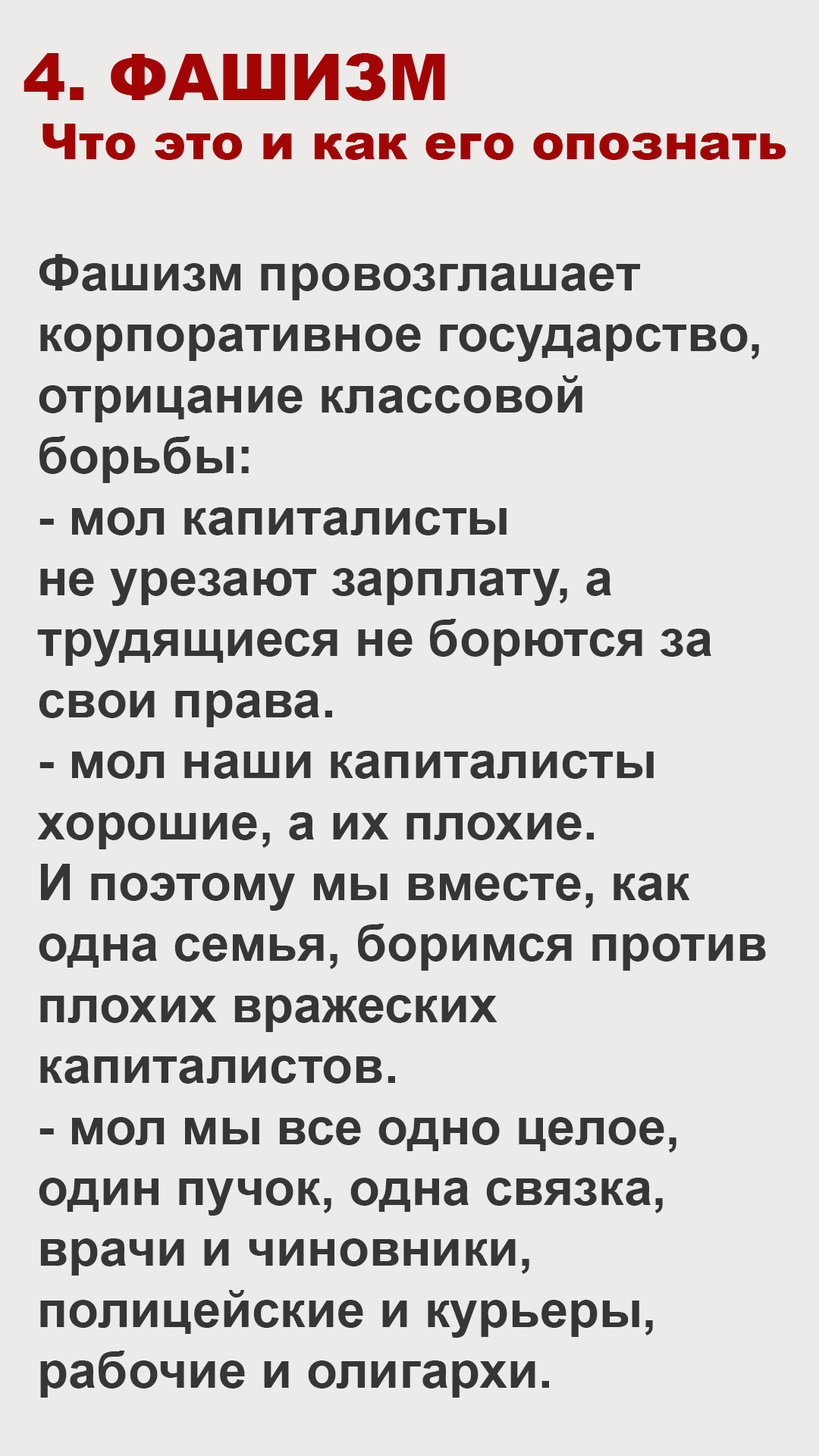
<style>
.page{position:relative;width:819px;height:1456px;background:#ecebe9}
.page>*{position:absolute;margin:0}
.t1{font:49.3px "Arial-Black";color:#a20403}
.t2{font:64.5px "Arial-Black";color:#a20403}
.t3{font:50.8px "Arial-BoldMT";color:#373634}
</style>
<div class="page">
<p class="t1" style="left:24px;top:53px;width:762px;height:107px"><span class="t2">4. ФАШИЗМ<br></span> Что это и как его опознать</p>
<p class="t3" style="left:37px;top:254px;width:729px;height:1144px">Фашизм провозглашает <br>корпоративное государство,<br>отрицание классовой<br>борьбы:<br>- мол капиталисты<br>не урезают зарплату, а <br>трудящиеся не борются за<br>свои права.<br>- мол наши капиталисты<br>хорошие, а их плохие.<br>И поэтому мы вместе, как <br>одна семья, боримся против<br>плохих вражеских <br>капиталистов.<br>- мол мы все одно целое,<br>один пучок, одна связка,<br>врачи и чиновники,<br>полицейские и курьеры,<br>рабочие и олигархи.</p>
</div>
